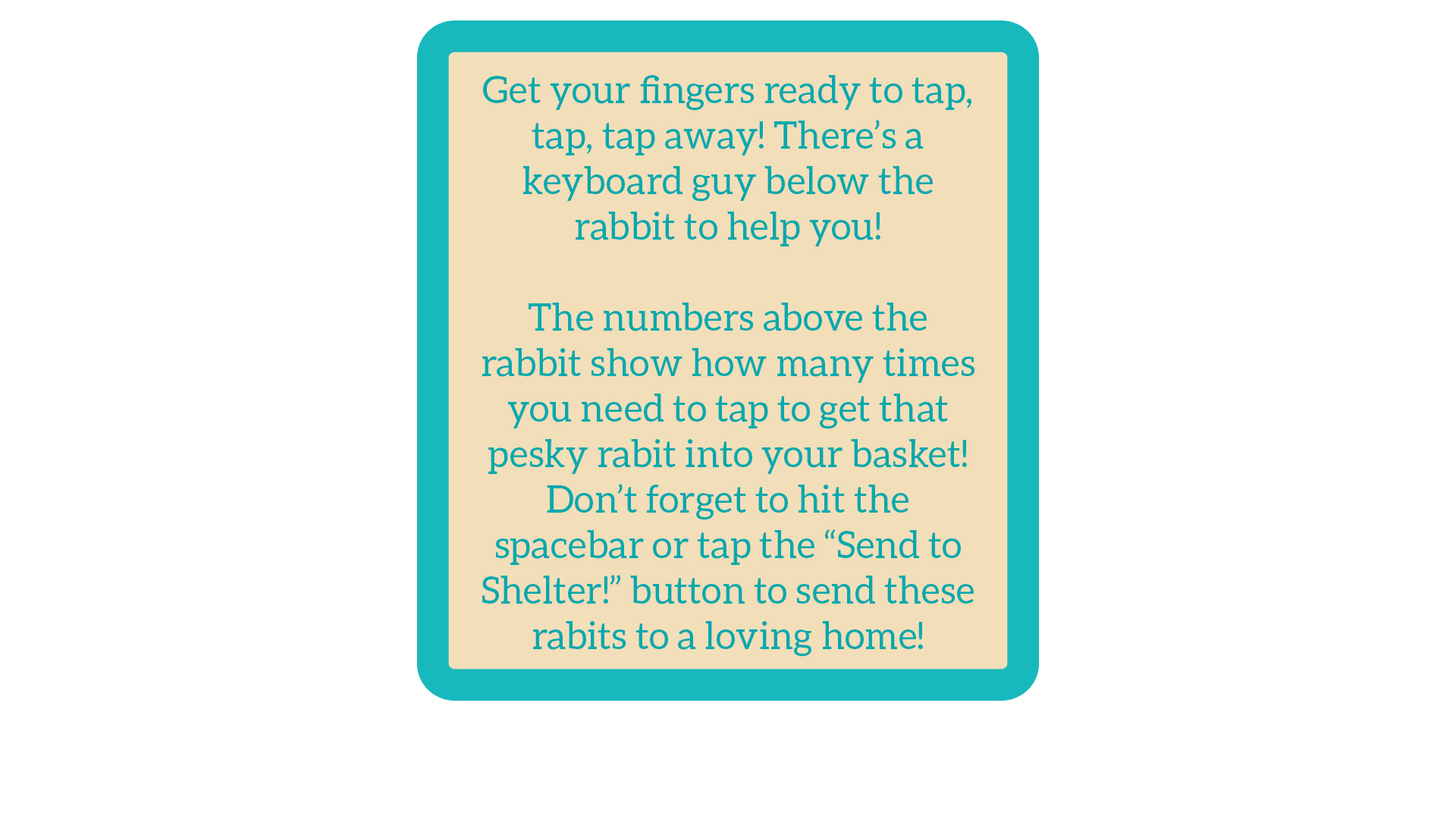
<style>
.page{position:relative;width:1456px;height:819px;background:#ffffff}
.page>*{position:absolute;margin:0}
.t1{font:37.9px "Aleo-Regular";color:#07a9ad}
</style>
<div class="page">
<p class="t1" style="left:482px;top:75px;width:493px;height:582px;text-align:center">Get your fingers ready to tap, tap, tap away! There’s a keyboard guy below the rabbit to help you!<br><br>The numbers above the rabbit show how many times you need to tap to get that pesky rabit into your basket! Don’t forget to hit the spacebar or tap the “Send to Shelter!” button to send these rabits to a loving home!</p>
</div>
